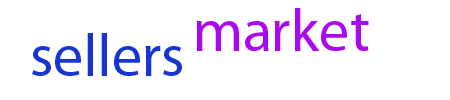
<style>
.page{position:relative;width:450px;height:100px;background:#ffffff}
.page>*{position:absolute;margin:0}
.t1{font:60px "MyriadPro-Regular";color:#ac08f0}
.t2{font:60px "MyriadPro-Regular";color:#1635d3}
</style>
<div class="page">
<p class="t1" style="left:196px;top:8px;width:173px;height:43px">market</p>
<p class="t2" style="left:32px;top:33px;width:150px;height:43px">sellers</p>
</div>
